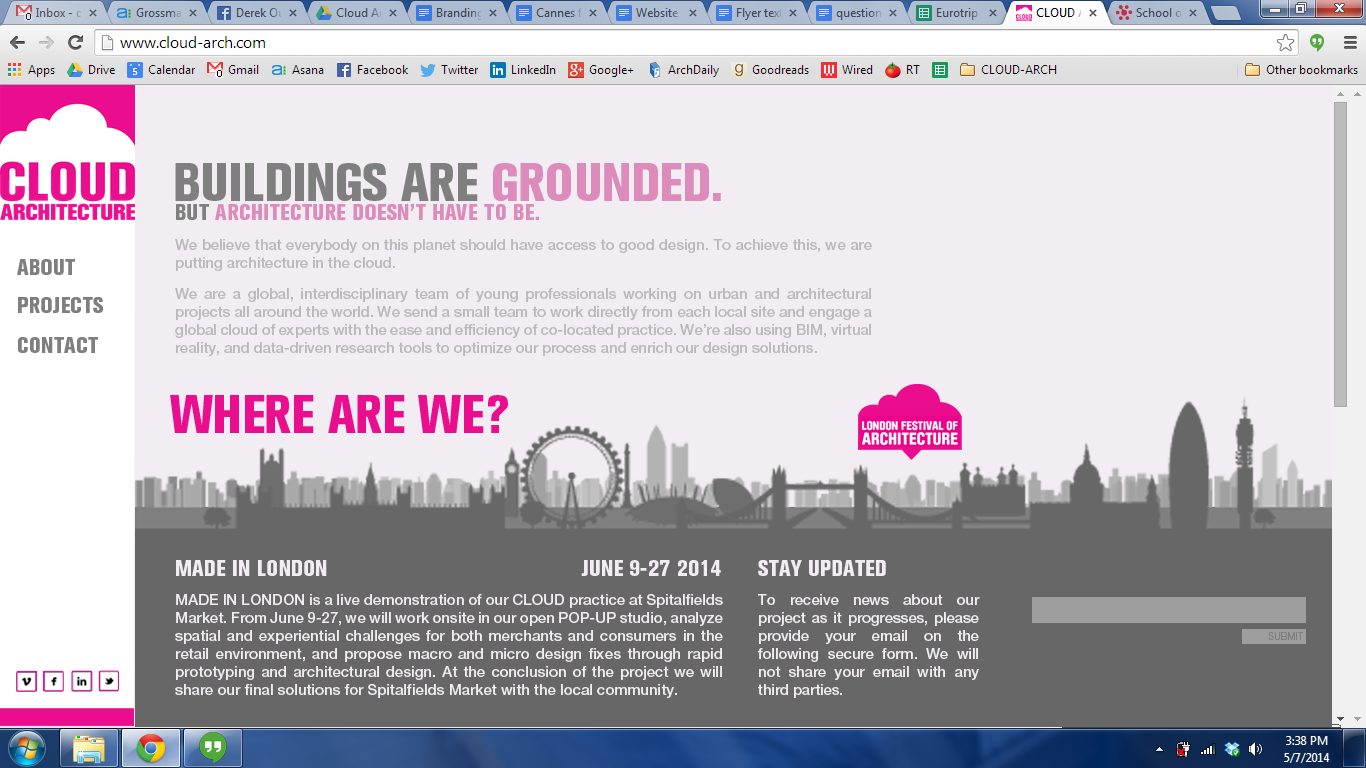
<style>
.page{position:relative;width:1366px;height:768px;background:#f2edf2}
.page>*{position:absolute;margin:0}
.t1{font:53px "AkzidenzGroteskBQ-XBdCnd";letter-spacing:-0.01em;color:#807f7f}
.t2{font:53px "AkzidenzGroteskBQ-XBdCnd";letter-spacing:-0.01em;color:#dc8bba}
.t3{font:22px "AkzidenzGroteskBQ-XBdCnd";letter-spacing:0.01em;color:#dc8bba}
.t4{font:22px "AkzidenzGroteskBQ-XBdCnd";letter-spacing:0.01em;color:#807f7f}
.t5{font:15px "HelveticaNeue-Medium";letter-spacing:-0.01em;color:#b9b9b9}
.t6{font:22px "AkzidenzGroteskBQ-XBdCnd";letter-spacing:0.015em;color:#807f7f}
.t7{font:53px "AkzidenzGroteskBQ-XBdCnd";letter-spacing:-0.01em;color:#ea0e8e}
.t8{font:22px "AkzidenzGroteskBQ-XBdCnd";letter-spacing:0.01em;color:#f2edf2}
.t9{font:22px "AkzidenzGroteskBQ-XBdCnd";color:#f2edf2}
.t10{font:15px "HelveticaNeue-Medium";color:#f2edf2}
.t11{font:15px "HelveticaNeue-Medium";letter-spacing:-0.01em;color:#f2edf2}
.t12{font:10px "AkzidenzGroteskBQ-Light";color:#807f7f}
</style>
<div class="page">
<p class="t1" style="left:175px;top:163px;width:546px;height:38px">BUILDINGS ARE <span class="t2">GROUNDED.</span></p>
<p class="t3" style="left:176px;top:204px;width:363px;height:16px"><span class="t4">BUT </span>ARCHITECTURE DOESN’T HAVE TO BE.</p>
<p class="t5" style="left:175px;top:239px;width:697px;height:32px;text-align:justify">We believe that everybody on this planet should have access to good design. To achieve this, we are putting architecture in the cloud.</p>
<p class="t6" style="left:17px;top:259px;width:58px;height:16px">ABOUT</p>
<p class="t5" style="left:175px;top:288px;width:697px;height:68px;text-align:justify">We are a global, interdisciplinary team of young professionals working on urban and architectural projects all around the world. We send a small team to work directly from each local site and engage a global cloud of experts with the ease and efficiency of co-located practice. We’re also using BIM, virtual reality, and data-driven research tools to optimize our process and enrich our design solutions.</p>
<p class="t6" style="left:18px;top:297px;width:85px;height:16px">PROJECTS</p>
<p class="t6" style="left:18px;top:337px;width:80px;height:16px">CONTACT</p>
<p class="t7" style="left:170px;top:395px;width:338px;height:38px">WHERE ARE WE?</p>
<p class="t8" style="left:176px;top:560px;width:545px;height:16px">MADE IN LONDON                                         JUNE 9-27 2014</p>
<p class="t9" style="left:758px;top:560px;width:128px;height:16px">STAY UPDATED</p>
<p class="t10" style="left:175px;top:594px;width:548px;height:104px;text-align:justify">MADE IN LONDON is a live demonstration of our CLOUD practice at Spitalfields Market. From June 9-27, we will work onsite in our open POP-UP studio, analyze spatial and experiential challenges for both merchants and consumers in the retail environment, and propose macro and micro design fixes through rapid prototyping and architectural design. At the conclusion of the project we will share our final solutions for Spitalfields Market with the local community.</p>
<p class="t11" style="left:758px;top:594px;width:222px;height:104px;text-align:justify">To receive news about our project as it progresses, please provide your email on the following secure form. We will not share your email with any third parties.</p>
<p class="t12" style="left:1268px;top:632px;width:35px;height:8px">SUBMIT</p>
</div>
